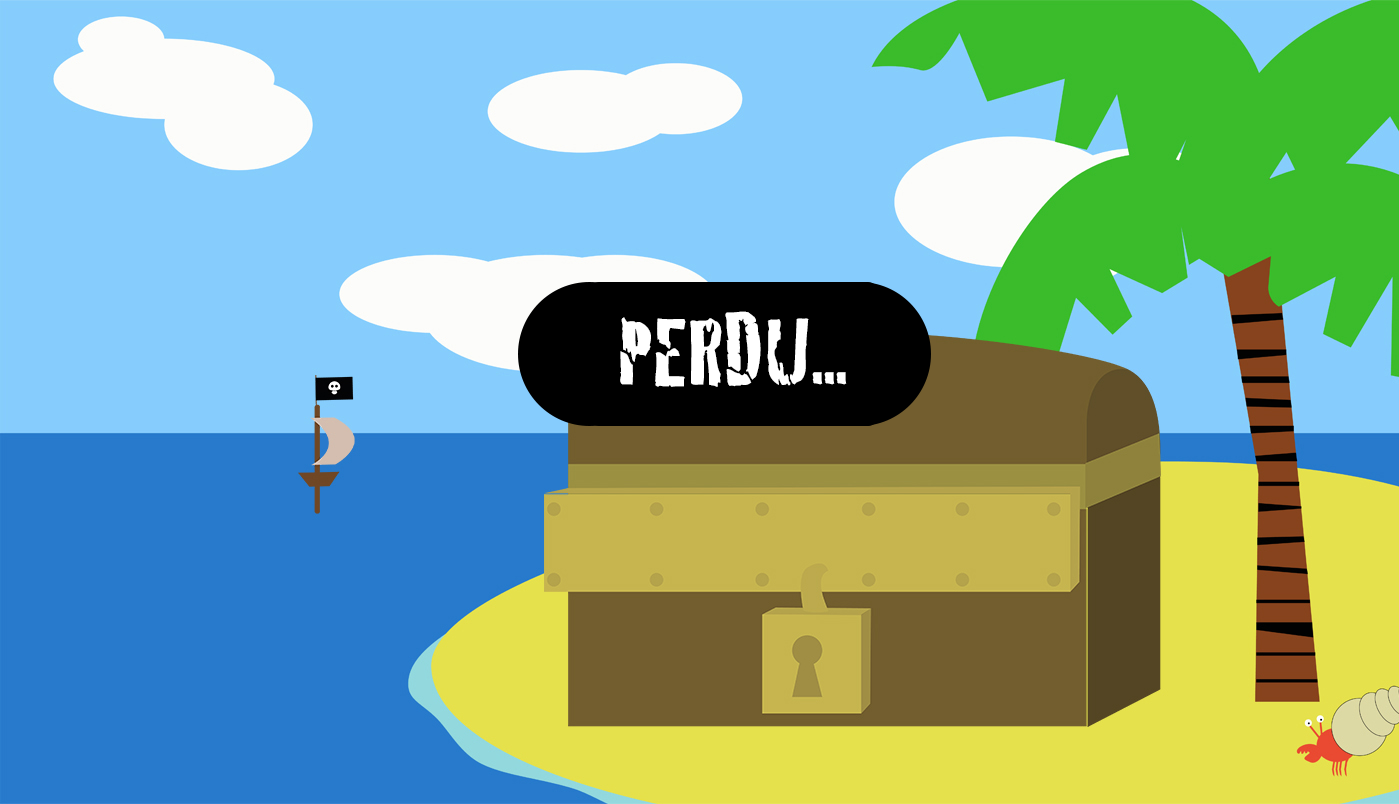
<style>
.page{position:relative;width:1399px;height:804px;background:#86ccfd}
.page>*{position:absolute;margin:0}
.t1{font:100px "Cracked";color:#ffffff}
</style>
<div class="page">
<p class="t1" style="left:620px;top:311px;width:227px;height:76px">PERDU...</p>
</div>
